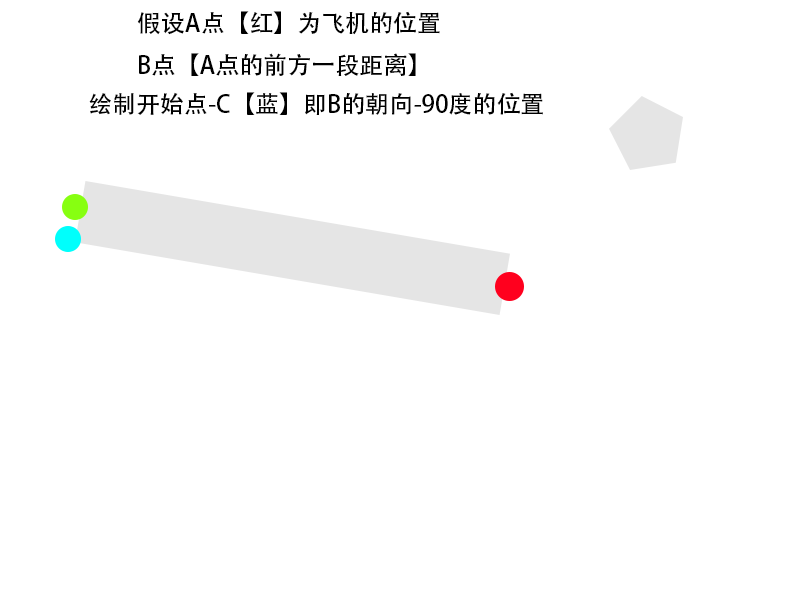
<style>
.page{position:relative;width:800px;height:600px;background:#ffffff}
.page>*{position:absolute;margin:0}
.t1{font:24px "AdobeHeitiStd-Regular";color:#000000}
</style>
<div class="page">
<p class="t1" style="left:137px;top:11px;width:303px;height:65px">假设A点【红】为飞机的位置<br>B点【A点的前方一段距离】</p>
<p class="t1" style="left:89px;top:92px;width:454px;height:23px">绘制开始点-C【蓝】即B的朝向-90度的位置</p>
</div>
